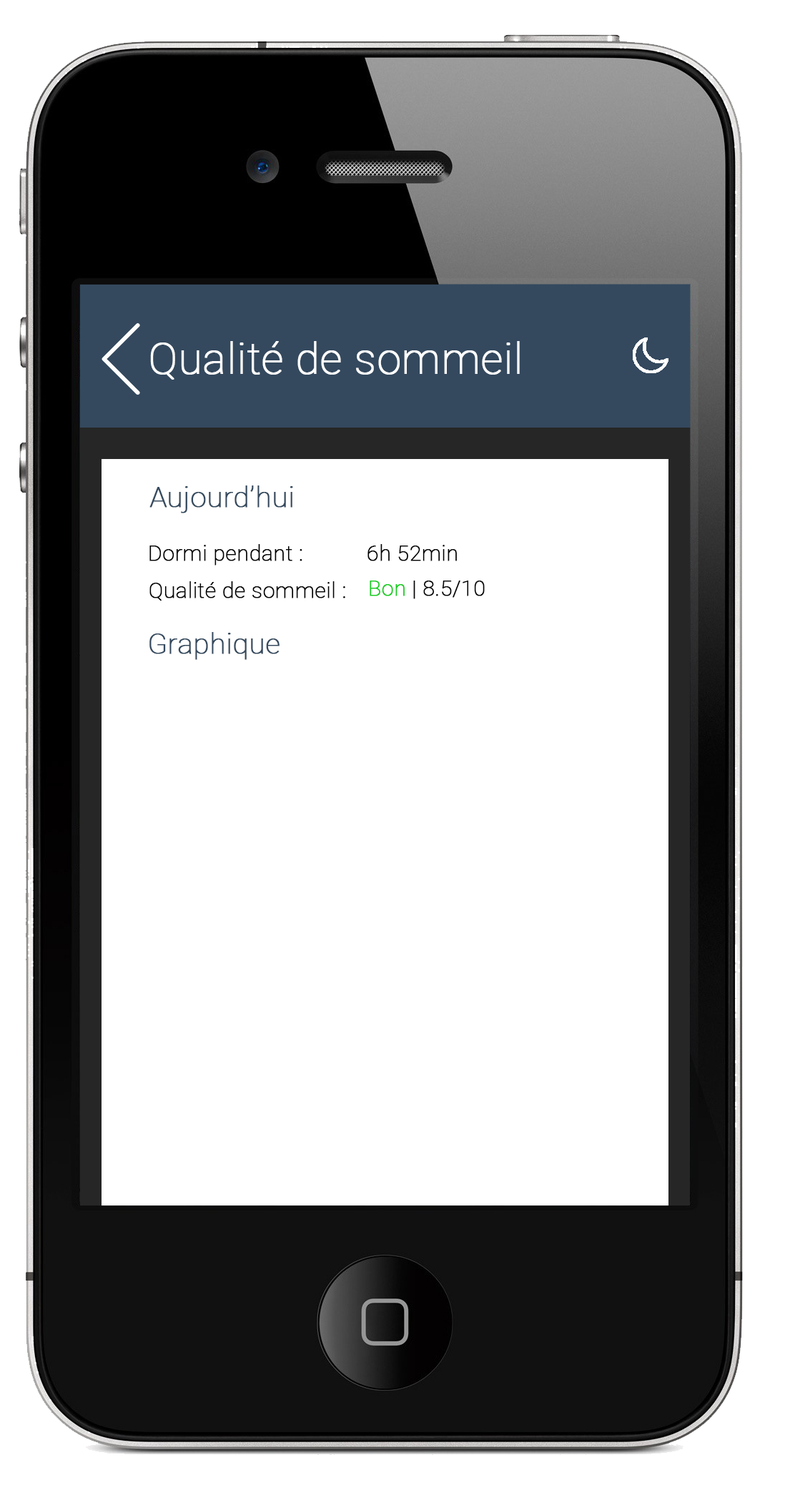
<style>
.page{position:relative;width:800px;height:1490px;background:#ffffff}
.page>*{position:absolute;margin:0}
.t1{font:42.9px "Roboto-Thin";color:#ffffff;font-weight:bold}
.t2{font:28.6px "Roboto-Thin";color:#34495e;font-weight:bold}
.t3{font:21.5px "Roboto-Thin";color:#000000;font-weight:bold}
.t4{font:21.5px "Roboto-Thin";color:#14cc1d;font-weight:bold}
</style>
<div class="page">
<p class="t1" style="left:150px;top:341px;width:370px;height:39px">Qualité de sommeil</p>
<p class="t2" style="left:149px;top:486px;width:144px;height:27px">Aujourd’hui</p>
<p class="t3" style="left:149px;top:544px;width:153px;height:22px">Dormi pendant :</p>
<p class="t3" style="left:368px;top:544px;width:89px;height:17px">6h 52min</p>
<p class="t3" style="left:149px;top:581px;width:196px;height:20px">Qualité de sommeil :</p>
<p class="t3" style="left:370px;top:581px;width:115px;height:18px"><span class="t4">Bon</span> | 8.5/10</p>
<p class="t2" style="left:149px;top:632px;width:131px;height:28px">Graphique</p>
</div>
